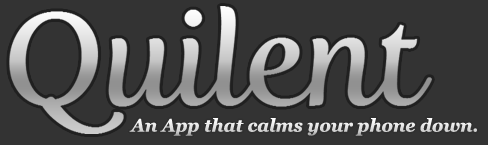
<style>
.page{position:relative;width:488px;height:145px;background:#333333}
.page>*{position:absolute;margin:0}
.t1{font:18px "Georgia-BoldItalic";color:#f7f7f7}
</style>
<div class="page">
<p class="t1" style="left:129px;top:118px;width:348px;height:18px">An App that calms your phone down.</p>
</div>
